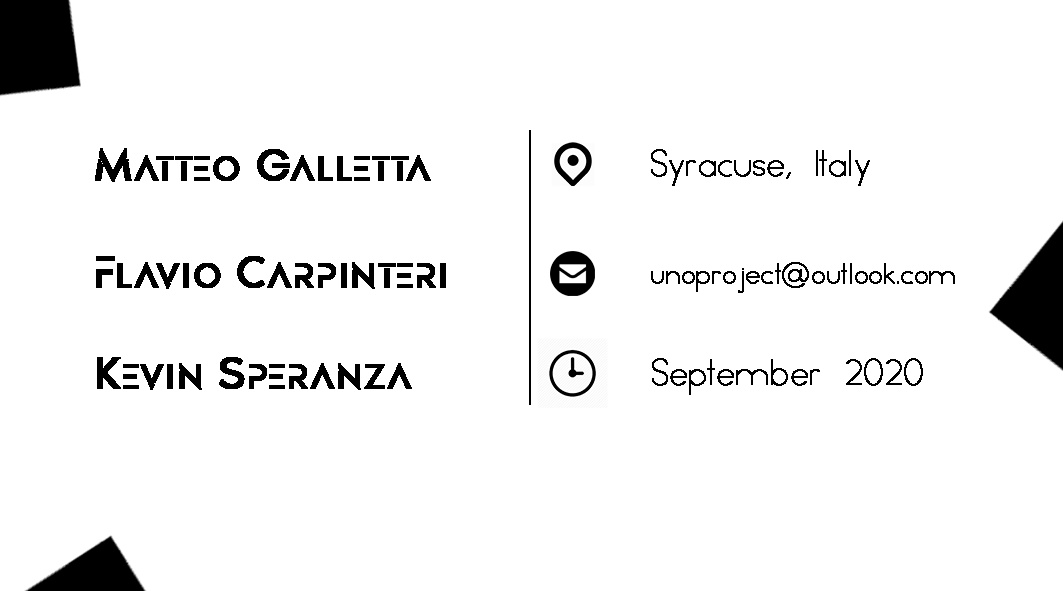
<style>
.page{position:relative;width:1063px;height:591px;background:#ffffff}
.page>*{position:absolute;margin:0}
.t1{font:50px "DESIGNERRegular";color:#000000;font-weight:bold}
.t2{font:41.7px "Minimal";color:#000000;font-weight:bold}
.t3{font:33.3px "Minimal";color:#000000;font-weight:bold}
</style>
<div class="page">
<p class="t1" style="left:95px;top:148px;width:336px;height:34px">Matteo Galletta</p>
<p class="t2" style="left:651px;top:149px;width:219px;height:37px">Syracuse, Italy</p>
<p class="t1" style="left:96px;top:256px;width:350px;height:33px">Flavio Carpinteri</p>
<p class="t3" style="left:651px;top:262px;width:304px;height:31px">unoproject@outlook.com</p>
<p class="t1" style="left:97px;top:357px;width:315px;height:33px">Kevin Speranza</p>
<p class="t2" style="left:652px;top:358px;width:271px;height:37px">September 2020</p>
</div>
